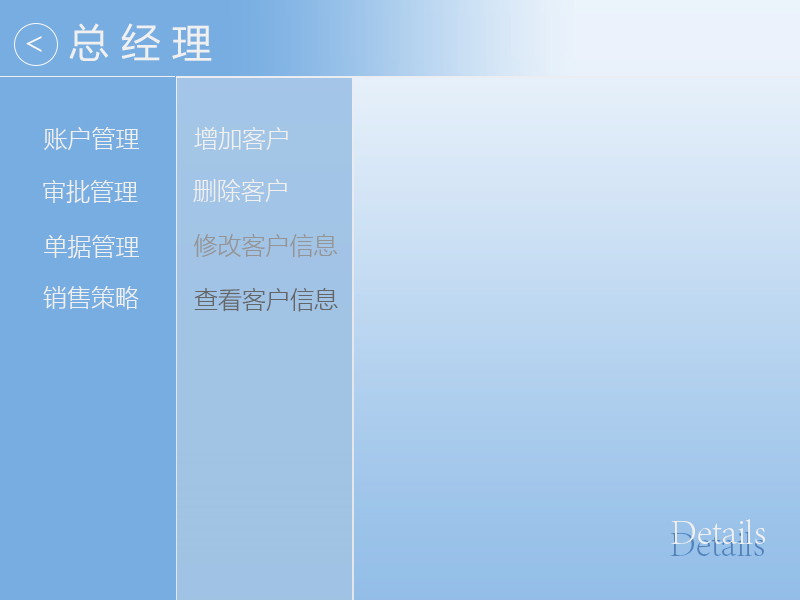
<style>
.page{position:relative;width:800px;height:600px;background:#77ade1}
.page>*{position:absolute;margin:0}
.t1{font:39.9px "MicrosoftYaHei";color:#f1f0f0}
.t2{font:24px "MicrosoftYaHeiLight";color:#f1f0f0}
.t3{font:24px "MicrosoftYaHeiLight";color:#949494}
.t4{font:24px "MicrosoftYaHeiLight";color:#656566}
.t5{font:36px "AdobeSongStd-Light";color:#f1f0f0}
.t6{font:36px "AdobeSongStd-Light";color:#5781b2}
</style>
<div class="page">
<p class="t1" style="left:69px;top:23px;width:143px;height:38px">总 经 理</p>
<p class="t2" style="left:44px;top:127px;width:95px;height:23px">账户管理</p>
<p class="t2" style="left:194px;top:127px;width:94px;height:23px">增加客户</p>
<p class="t2" style="left:43px;top:180px;width:95px;height:23px">审批管理</p>
<p class="t2" style="left:193px;top:179px;width:94px;height:23px">删除客户</p>
<p class="t2" style="left:44px;top:235px;width:95px;height:24px">单据管理</p>
<p class="t3" style="left:194px;top:234px;width:144px;height:24px">修改客户信息</p>
<p class="t2" style="left:43px;top:286px;width:96px;height:24px">销售策略</p>
<p class="t4" style="left:194px;top:288px;width:144px;height:24px">查看客户信息</p>
<p class="t5" style="left:671px;top:519px;width:94px;height:25px">Details</p>
<p class="t6" style="left:670px;top:531px;width:94px;height:25px">Details</p>
</div>
